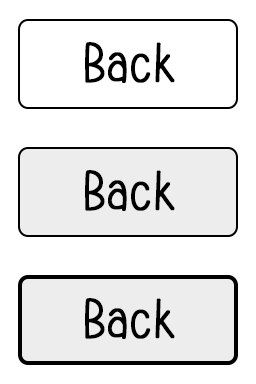
<style>
.page{position:relative;width:256px;height:384px;background:#ffffff}
.page>*{position:absolute;margin:0}
.t1{font:57px "SimpleHandmadeRegular";letter-spacing:0.009em;color:#000000;font-weight:bold;scale:0.89 1}
</style>
<div class="page">
<p class="t1" style="left:85px;top:42px;width:90px;height:41px">Back</p>
<p class="t1" style="left:85px;top:170px;width:90px;height:41px">Back</p>
<p class="t1" style="left:85px;top:298px;width:90px;height:41px">Back</p>
</div>
